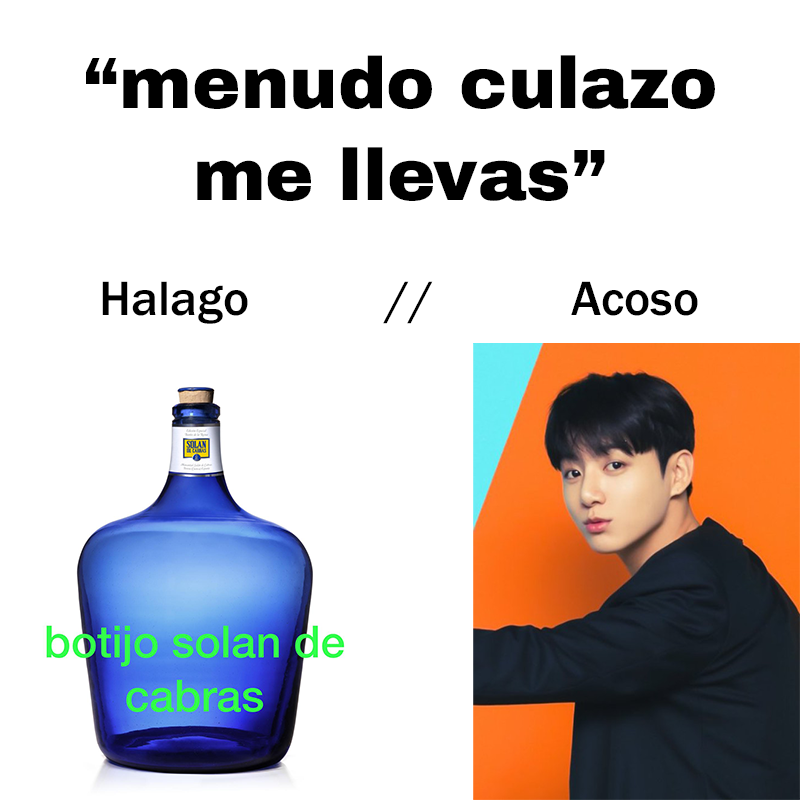
<style>
.page{position:relative;width:800px;height:800px;background:#ffffff}
.page>*{position:absolute;margin:0}
.t1{font:72.8px "ArchivoBlack-Regular";color:#000000}
.t2{font:49.9px "FranklinGothic-Medium";color:#000000}
</style>
<div class="page">
<p class="t1" style="left:86px;top:55px;width:629px;height:146px;text-align:center">“menudo culazo<br>me llevas”</p>
<p class="t2" style="left:102px;top:281px;width:596px;height:43px">Halago           //           Acoso</p>
</div>
